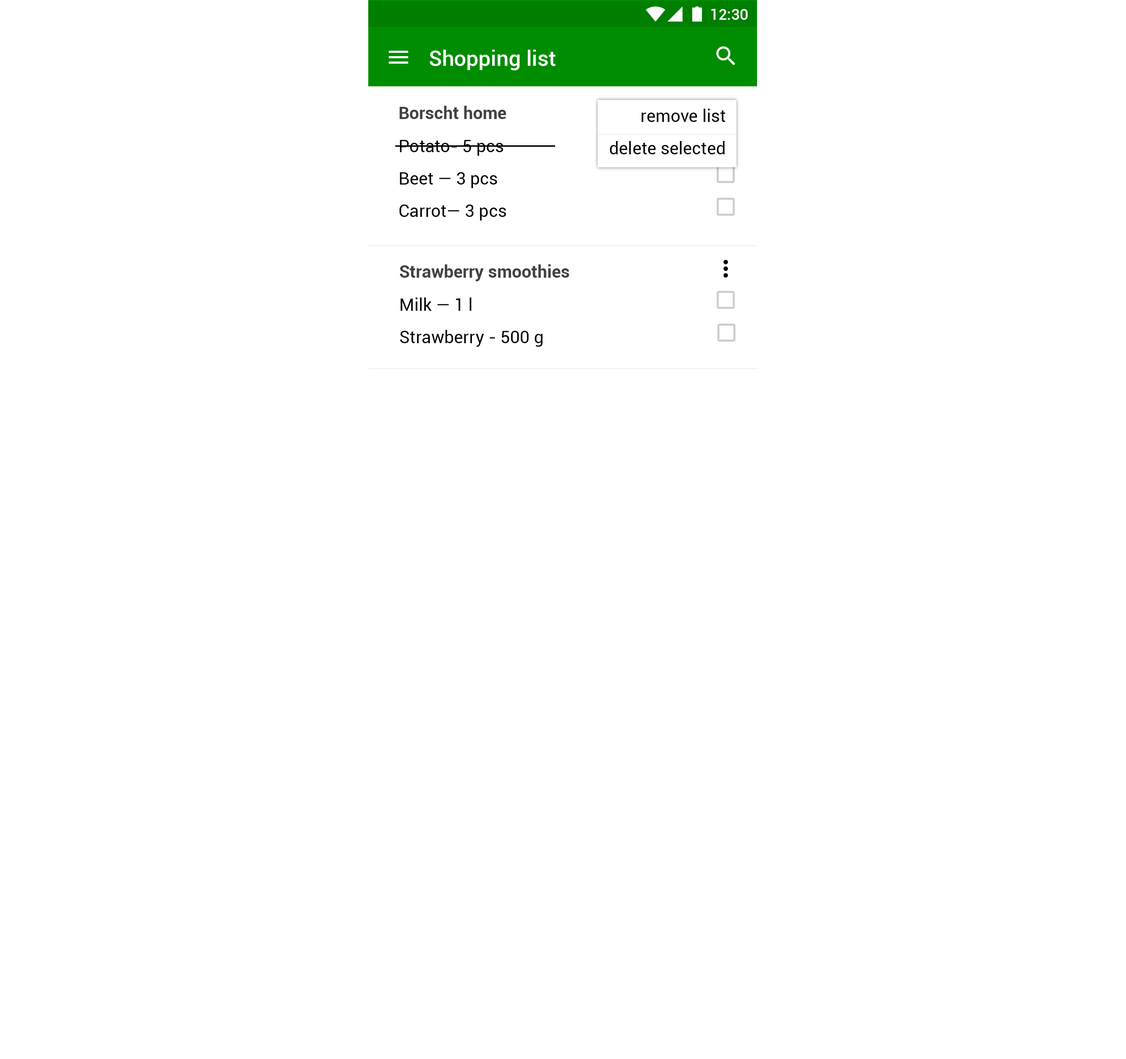
<style>
.page{position:relative;width:1126px;height:1059px;background:#ffffff}
.page>*{position:absolute;margin:0}
.t1{font:15.1px "Roboto-Medium";color:#ffffff}
.t2{font:21.6px "Roboto-Medium";color:#ffffff}
.t3{font:17.3px "Roboto-Bold";color:#424242}
.t4{font:17.3px/32.4px "Roboto-Regular";color:#000000}
</style>
<div class="page">
<p class="t1" style="left:711px;top:9px;width:36px;height:11px">12:30</p>
<p class="t2" style="left:430px;top:50px;width:125px;height:21px">Shopping list</p>
<p class="t3" style="left:399px;top:106px;width:107px;height:13px">Borscht home</p>
<p class="t4" style="left:610px;top:109px;width:115px;height:45px;text-align:right">remove list<br>delete selected</p>
<p class="t4" style="left:399px;top:140px;width:107px;height:81px">Potato- 5 pcs<br>Beet — 3 pcs<br>Carrot— 3 pcs</p>
<p class="t3" style="left:400px;top:264px;width:169px;height:17px">Strawberry smoothies</p>
<p class="t4" style="left:400px;top:298px;width:142px;height:49px">Milk — 1 l<br>Strawberry - 500 g</p>
</div>
